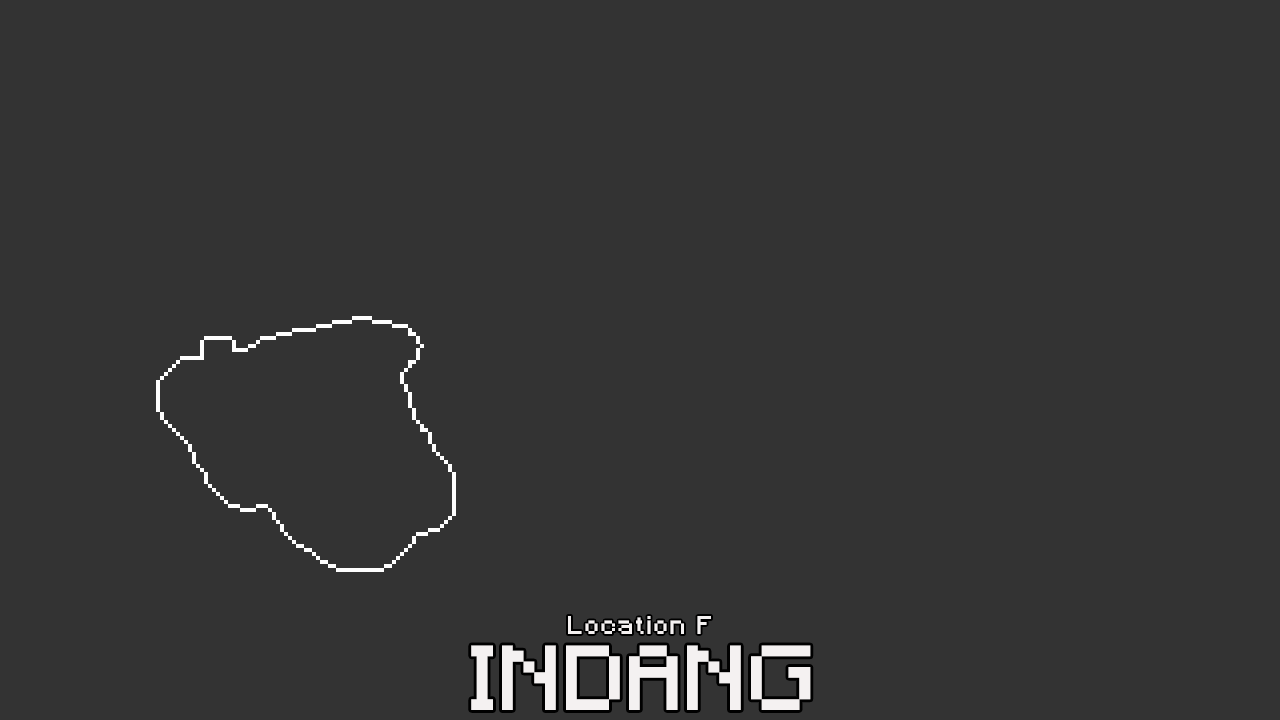
<style>
.page{position:relative;width:1280px;height:720px;background:#333333}
.page>*{position:absolute;margin:0}
.t1{font:24px "Minecraft";letter-spacing:0.1em;color:#f4f1f1}
.t2{font:86px "Minecraft";letter-spacing:0.05em;color:#f4f1f1}
</style>
<div class="page">
<p class="t1" style="left:568px;top:616px;width:143px;height:18px">Location F</p>
<p class="t2" style="left:471px;top:645px;width:340px;height:65px">INDANG</p>
</div>
